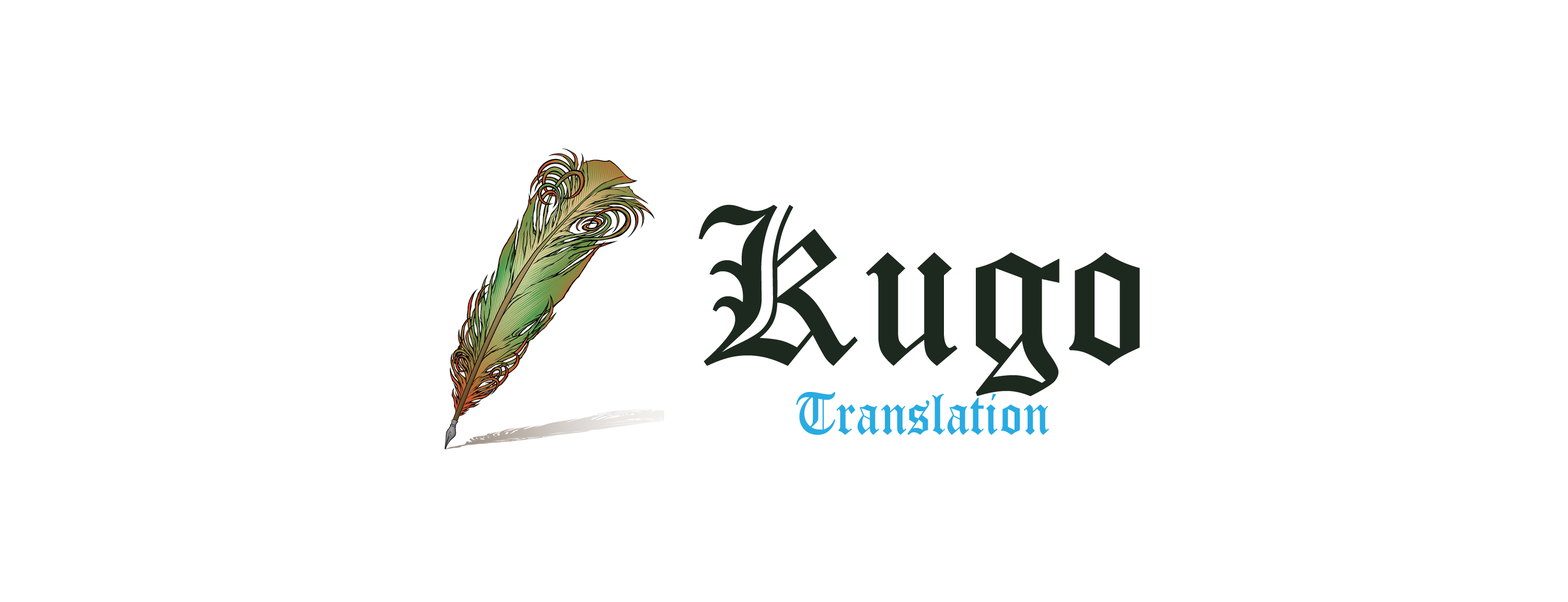
<style>
.page{position:relative;width:1568px;height:602px;background:#ffffff}
.page>*{position:absolute;margin:0}
.t1{font:57.8px "OldEnglishTextMT";color:#29abe2;scale:0.92 1}
.t2{font:57.8px "Broadway";color:#000000;scale:0.92 1}
.t3{font:216.7px "OldEnglishTextMT";color:#1d281f;scale:0.92 1}
</style>
<div class="page">
<p class="t1" style="left:698px;top:204px;width:442px;height:231px;text-align:center"><span class="t2"><br></span><span class="t3">Kugo<br></span>Translation<br><span class="t3"><br>fsdafka</span></p>
</div>
